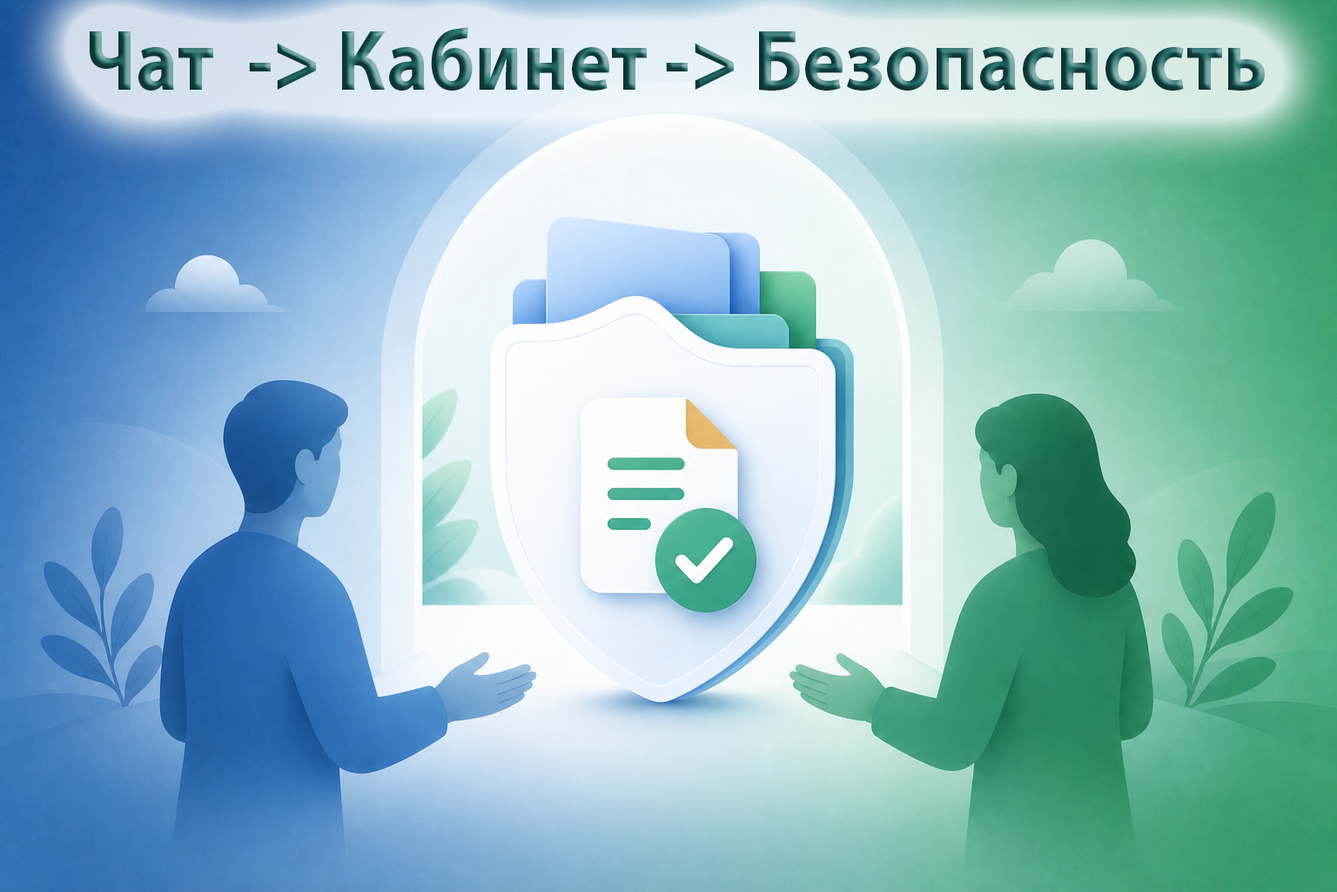
<style>
.page{position:relative;width:1337px;height:892px}
.page>*{position:absolute;margin:0}
.t1{font:87.1px "MyriadPro-Bold";scale:0.92 1}
</style>
<div class="page">
<p class="t1" style="left:90px;top:27px;width:1175px;height:64px">Чат  -&gt; Кабинет -&gt; Безопасность</p>
</div>
